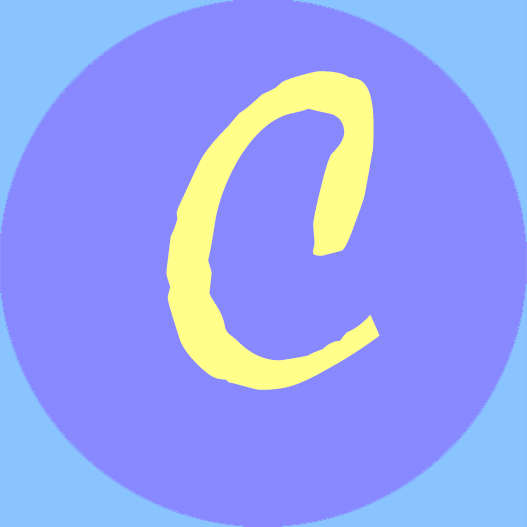
<style>
.page{position:relative;width:527px;height:527px;background:#8989ff}
.page>*{position:absolute;margin:0}
.t1{font:457.9px "Mistral";color:#ffff89}
</style>
<div class="page">
<p class="t1" style="left:166px;top:71px;width:214px;height:319px">C</p>
</div>
